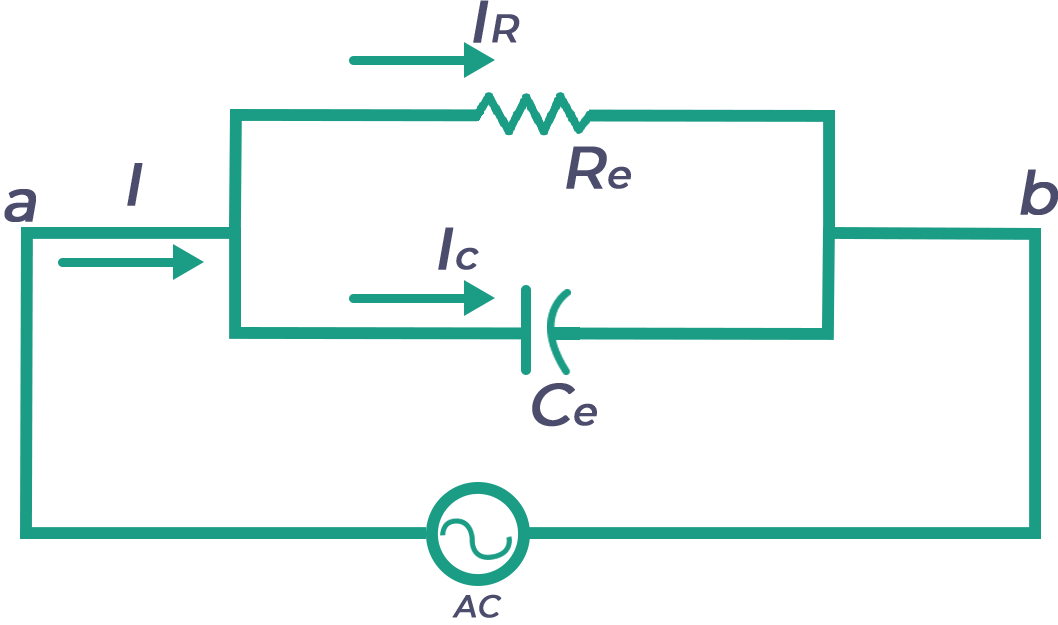
<style>
.page{position:relative;width:1058px;height:625px;background:#ffffff}
.page>*{position:absolute;margin:0}
.t1{font:59.3px "Montserrat-Medium";letter-spacing:0.005em;color:#4c4c6d;font-weight:bold;font-style:italic}
.t2{font:39.5px "Montserrat-Medium";letter-spacing:0.005em;color:#4c4c6d;font-weight:bold;font-style:italic}
.t3{font:60px "Montserrat-Medium";letter-spacing:0.005em;color:#4c4c6d;font-weight:bold;font-style:italic}
.t4{font:31.4px "Montserrat-Medium";letter-spacing:0.005em;color:#4c4c6d;font-weight:bold;font-style:italic}
</style>
<div class="page">
<p class="t1" style="left:473px;top:0px;width:47px;height:43px">I<span class="t2">R</span></p>
<p class="t1" style="left:566px;top:146px;width:65px;height:43px">R<span class="t2">e</span></p>
<p class="t3" style="left:127px;top:163px;width:16px;height:43px">I</p>
<p class="t3" style="left:1020px;top:169px;width:39px;height:46px">b</p>
<p class="t3" style="left:4px;top:189px;width:32px;height:33px">a</p>
<p class="t1" style="left:438px;top:227px;width:41px;height:43px">I<span class="t2">c</span></p>
<p class="t1" style="left:532px;top:383px;width:65px;height:44px">C<span class="t2">e</span></p>
<p class="t4" style="left:452px;top:594px;width:50px;height:24px">AC</p>
</div>
